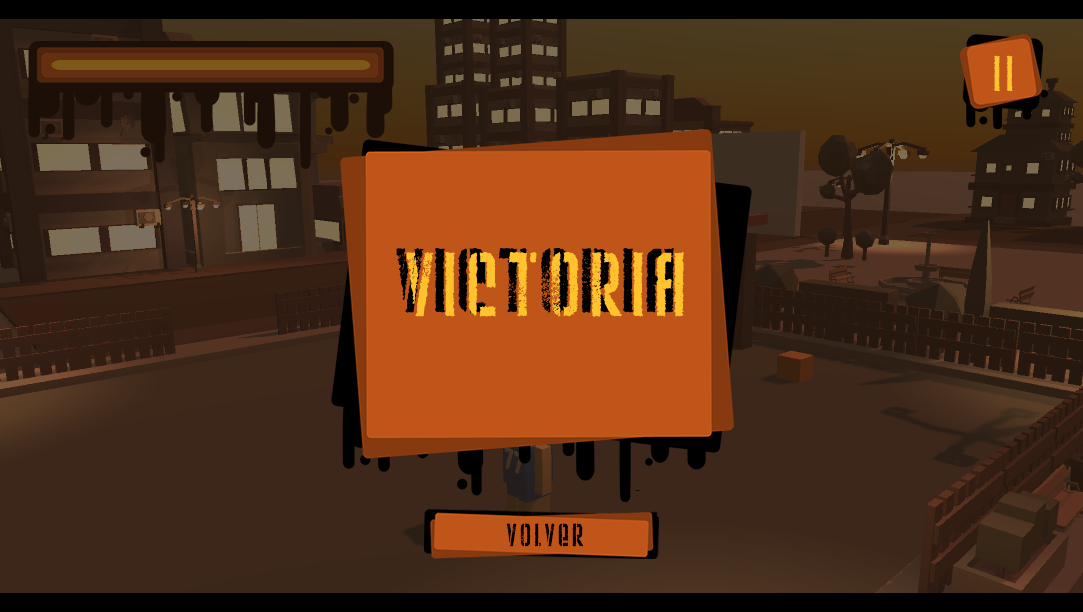
<style>
.page{position:relative;width:1083px;height:612px}
.page>*{position:absolute;margin:0}
.t1{font:50px "WeltronUrban";letter-spacing:0.07em;color:#ffc32e;scale:0.89 1}
.t2{font:32px "WeltronUrban";letter-spacing:0.07em;color:#000000;scale:0.89 1}
</style>
<div class="page">
<p class="t1" style="left:994px;top:55px;width:19px;height:37px">ii</p>
<p class="t2" style="left:506px;top:523px;width:78px;height:24px">volver</p>
</div>
